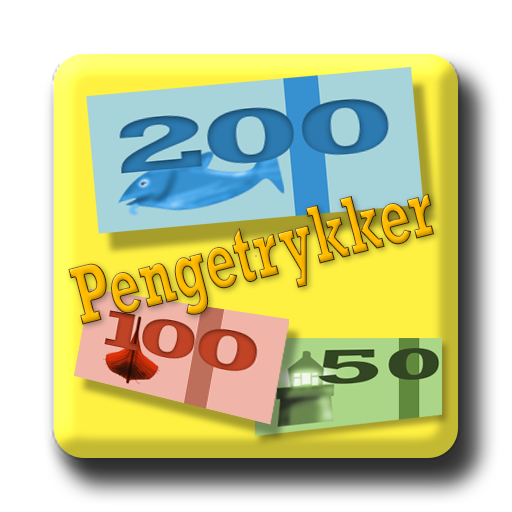
<style>
.page{position:relative;width:512px;height:512px;background:#ffffff}
.page>*{position:absolute;margin:0}
.t1{font:84.3px "Rockwell-Bold";scale:0.65 1}
</style>
<div class="page">
<p class="t1" style="left:68px;top:193px;width:366px;height:132px;rotate:-14deg">Pengetrykker</p>
</div>
